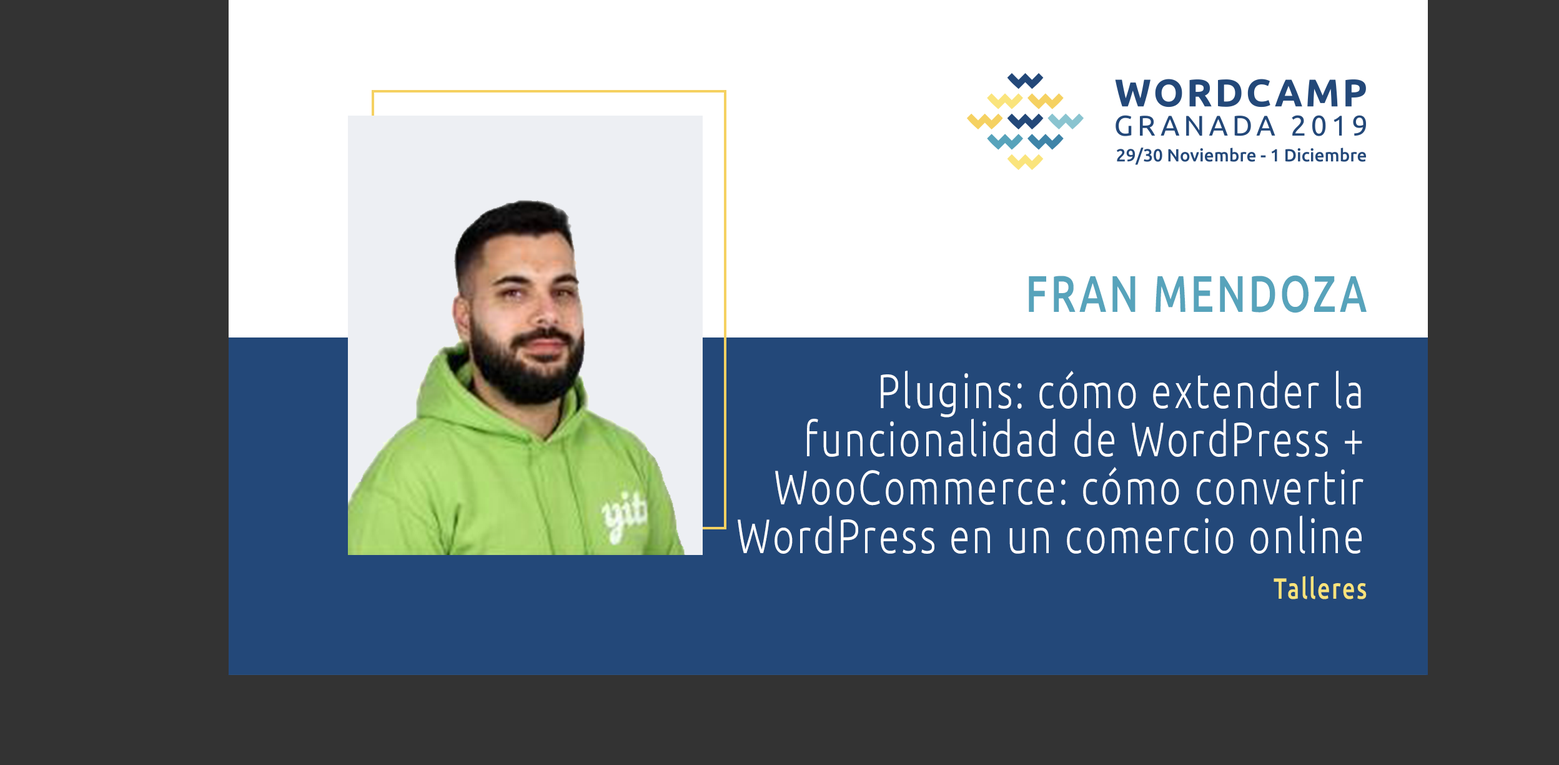
<style>
.page{position:relative;width:1559px;height:765px;background:#333333}
.page>*{position:absolute;margin:0}
.t1{font:51.4px "Ubuntu-Medium";letter-spacing:0.068em;color:#57a3bb;scale:0.77 1}
.t2{font:48.2px/48.2px "Ubuntu-Light";letter-spacing:0.068em;color:#ffffff;scale:0.77 1}
.t3{font:29.2px "Ubuntu-Medium";letter-spacing:0.068em;color:#f9e37b;scale:0.77 1}
</style>
<div class="page">
<p class="t1" style="left:1029px;top:275px;width:338px;height:38px">FRAN MENDOZA</p>
<p class="t2" style="left:738px;top:370px;width:626px;height:184px;text-align:right">Plugins: cómo extender la funcionalidad de WordPress + WooCommerce: cómo convertir WordPress en un comercio online</p>
<p class="t3" style="left:1274px;top:575px;width:93px;height:24px">Talleres</p>
</div>
